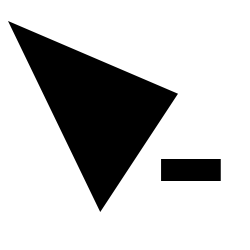
<style>
.page{position:relative;width:250px;height:250px;background:#ffffff}
.page>*{position:absolute;margin:0}
.t1{font:242.6px "Helvetica";color:#000000}
</style>
<div class="page">
<p class="t1" style="left:161px;top:159px;width:60px;height:22px">-</p>
</div>
